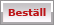
<style>
.page{position:relative;width:80px;height:25px;background:#ffffff}
.page>*{position:absolute;margin:0}
.t1{font:10px "Verdana-Bold";color:#bd1418}
</style>
<div class="page">
<p class="t1" style="left:8px;top:8px;width:38px;height:8px">Beställ</p>
</div>
